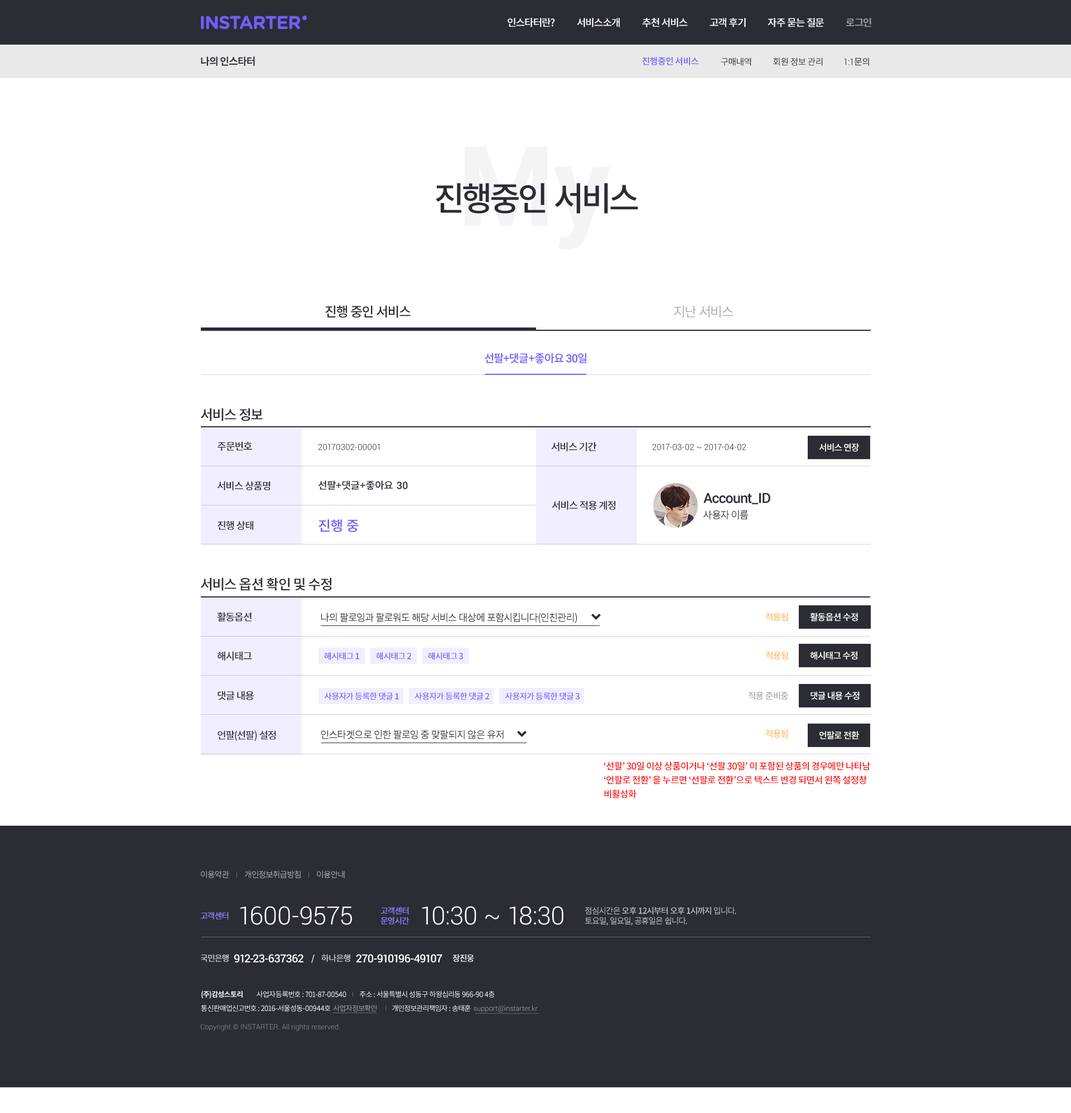
<style>
.page{position:relative;width:1071px;height:1113px;background:#ffffff}
.page>*{position:absolute;margin:0}
.t1{font:18.6px "GothamRounded-Bold";letter-spacing:-0.04em;color:#715eff}
.t2{font:10px "NotoSansCJKkr-Medium";letter-spacing:-0.04em;color:#ffffff}
.t3{font:10px "NotoSansCJKkr-Medium";letter-spacing:-0.04em;color:#abacae}
.t4{font:10px "NotoSansCJKkr-Bold";letter-spacing:-0.04em;color:#2b2c34;text-transform:uppercase}
.t5{font:8.9px "NotoSansCJKkr-Medium";letter-spacing:-0.04em;color:#6e5cf8;text-transform:uppercase}
.t6{font:8.9px "NotoSansCJKkr-Regular";letter-spacing:-0.04em;color:#2b2c34;text-transform:uppercase}
.t7{font:8.9px "Roboto-Light";letter-spacing:-0.04em;color:#2b2c34;text-transform:uppercase}
.t8{font:33.5px "NotoSansCJKkr-Medium";letter-spacing:-0.04em;color:#2b2c34;text-transform:uppercase}
.t9{font:13.4px "NotoSansCJKkr-Medium";letter-spacing:-0.04em;color:#2b2c34}
.t10{font:13.4px "NotoSansCJKkr-Regular";letter-spacing:-0.04em;color:#ababad}
.t11{font:11.2px "NotoSansCJKkr-Medium";letter-spacing:-0.04em;color:#715eff}
.t12{font:11.2px "Roboto-Medium";letter-spacing:-0.04em;color:#715eff}
.t13{font:13.9px "NotoSansCJKkr-Medium";letter-spacing:-0.04em;color:#2b2c34}
.t14{font:10px "NotoSansCJKkr-Medium";letter-spacing:-0.04em;color:#2b2c34}
.t15{font:8.4px "Roboto-Light";color:#2b2c34}
.t16{font:8.9px "NotoSansCJKkr-Medium";letter-spacing:-0.04em;color:#ffffff}
.t17{font:10px "NotoSansCJKkr-Medium";color:#2b2c34}
.t18{font:10px "Roboto-Medium";color:#2b2c34}
.t19{font:13.9px "Roboto-Medium";letter-spacing:-0.04em;color:#2b2c34}
.t20{font:10px "NotoSansCJKkr-Regular";letter-spacing:-0.04em;color:#2b2c34}
.t21{font:13.9px "NotoSansCJKkr-Medium";color:#715eff}
.t22{font:8.9px "NotoSansCJKkr-Medium";letter-spacing:-0.04em;color:#ffbc66}
.t23{font:8.4px "NotoSansCJKkr-Medium";letter-spacing:-0.04em;color:#715eff}
.t24{font:8.9px "NotoSansCJKkr-Medium";letter-spacing:-0.04em;color:#ababad}
.t25{font:9.3px/13.9px "NotoSansCJKkr-Medium";letter-spacing:-0.04em;color:#ff0000}
.t26{font:8.4px "NotoSansCJKkr-Regular";letter-spacing:-0.04em;color:#abacae}
.t27{font:8.4px "NotoSansCJKkr-Medium";letter-spacing:-0.04em;color:#9182ff}
.t28{font:25.1px "Roboto-Light";color:#ffffff}
.t29{font:8.4px/10px "NotoSansCJKkr-Medium";letter-spacing:-0.04em;color:#9182ff}
.t30{font:8.4px/10px "NotoSansCJKkr-Regular";letter-spacing:-0.04em;color:#bebebf}
.t31{font:8.4px/10px "NotoSansCJKkr-Medium";letter-spacing:-0.04em;color:#bebebf}
.t32{font:8.4px "NotoSansCJKkr-Medium";letter-spacing:-0.04em;color:#cfd0d1}
.t33{font:11.2px "Roboto-Medium";letter-spacing:-0.04em;color:#ffffff}
.t34{font:8.4px "NotoSansCJKkr-Medium";letter-spacing:-0.04em;color:#ffffff}
.t35{font:7.3px/13.9px "NotoSansCJKkr-Regular";letter-spacing:-0.04em;color:#ffffff}
.t36{font:7.3px/13.9px "NotoSansCJKkr-Bold";letter-spacing:-0.04em;color:#ffffff}
.t37{font:7.3px/13.9px "NotoSansCJKkr-Regular";letter-spacing:-0.04em;color:#abacae}
.t38{font:7.3px/13.9px "Roboto-Light";color:#abacae}
.t39{font:7.3px "Roboto-Light";color:#95969a}
</style>
<div class="page">
<p class="t1" style="left:201px;top:16px;width:99px;height:14px">INSTARTER</p>
<p class="t2" style="left:508px;top:18px;width:47px;height:9px">인스타터란?</p>
<p class="t2" style="left:577px;top:18px;width:43px;height:9px">서비스소개</p>
<p class="t2" style="left:642px;top:18px;width:46px;height:9px">추천 서비스</p>
<p class="t2" style="left:710px;top:18px;width:36px;height:9px">고객 후기</p>
<p class="t2" style="left:768px;top:18px;width:56px;height:9px">자주 묻는 질문</p>
<p class="t3" style="left:846px;top:18px;width:26px;height:9px">로그인</p>
<p class="t4" style="left:201px;top:56px;width:54px;height:10px">나의 인스타터</p>
<p class="t5" style="left:642px;top:57px;width:57px;height:8px">진행중인 서비스</p>
<p class="t6" style="left:721px;top:57px;width:31px;height:9px">구매내역</p>
<p class="t6" style="left:773px;top:57px;width:50px;height:9px">회원 정보 관리</p>
<p class="t7" style="left:844px;top:57px;width:25px;height:9px">1:1<span class="t6">문의</span></p>
<p class="t8" style="left:436px;top:183px;width:202px;height:31px">진행중인 서비스</p>
<p class="t9" style="left:325px;top:305px;width:86px;height:13px">진행 중인 서비스</p>
<p class="t10" style="left:674px;top:305px;width:59px;height:13px">지난 서비스</p>
<p class="t11" style="left:485px;top:353px;width:102px;height:11px">선팔+댓글+좋아요 <span class="t12">30</span>일</p>
<p class="t13" style="left:201px;top:408px;width:62px;height:13px">서비스 정보</p>
<p class="t14" style="left:218px;top:441px;width:34px;height:10px">주문번호</p>
<p class="t15" style="left:318px;top:444px;width:62px;height:6px">20170302-00001</p>
<p class="t14" style="left:551px;top:442px;width:46px;height:9px">서비스 기간</p>
<p class="t15" style="left:652px;top:444px;width:95px;height:6px">2017-03-02 ~ 2017-04-02</p>
<p class="t16" style="left:819px;top:443px;width:40px;height:9px">서비스 연장</p>
<p class="t14" style="left:217px;top:481px;width:54px;height:9px">서비스 상품명</p>
<p class="t17" style="left:318px;top:480px;width:90px;height:10px">선팔+댓글+좋아요 <span class="t18">30</span></p>
<p class="t19" style="left:704px;top:493px;width:67px;height:11px">Account_ID</p>
<p class="t14" style="left:552px;top:500px;width:64px;height:10px">서비스 적용 계정</p>
<p class="t20" style="left:703px;top:510px;width:45px;height:9px">사용자 이름</p>
<p class="t14" style="left:218px;top:521px;width:35px;height:9px">진행 상태</p>
<p class="t21" style="left:319px;top:519px;width:40px;height:13px">진행 중</p>
<p class="t13" style="left:201px;top:577px;width:131px;height:14px">서비스 옵션 확인 및 수정</p>
<p class="t14" style="left:217px;top:612px;width:35px;height:10px">활동옵션</p>
<p class="t20" style="left:321px;top:613px;width:256px;height:10px">나의 팔로잉과 팔로워도 해당 서비스 대상에 포함시킵니다(인친관리)</p>
<p class="t22" style="left:766px;top:613px;width:22px;height:9px">적용됨</p>
<p class="t16" style="left:810px;top:613px;width:48px;height:9px">활동옵션 수정</p>
<p class="t14" style="left:217px;top:651px;width:35px;height:10px">해시태그</p>
<p class="t23" style="left:324px;top:652px;width:35px;height:8px">해시태그 1</p>
<p class="t23" style="left:376px;top:652px;width:35px;height:8px">해시태그 2</p>
<p class="t23" style="left:428px;top:652px;width:35px;height:8px">해시태그 3</p>
<p class="t22" style="left:766px;top:651px;width:22px;height:9px">적용됨</p>
<p class="t16" style="left:810px;top:651px;width:48px;height:9px">해시태그 수정</p>
<p class="t14" style="left:218px;top:691px;width:36px;height:9px">댓글 내용</p>
<p class="t23" style="left:324px;top:692px;width:75px;height:8px">사용자가 등록한 댓글 1</p>
<p class="t23" style="left:415px;top:692px;width:74px;height:8px">사용자가 등록한 댓글 2</p>
<p class="t23" style="left:505px;top:692px;width:75px;height:8px">사용자가 등록한 댓글 3</p>
<p class="t24" style="left:748px;top:691px;width:40px;height:9px">적용 준비중</p>
<p class="t16" style="left:811px;top:691px;width:49px;height:9px">댓글 내용 수정</p>
<p class="t14" style="left:218px;top:730px;width:58px;height:11px">언팔(선팔) 설정</p>
<p class="t20" style="left:321px;top:730px;width:183px;height:9px">인스타겟으로 인한 팔로잉 중 맞팔되지 않은 유저</p>
<p class="t22" style="left:766px;top:729px;width:22px;height:9px">적용됨</p>
<p class="t16" style="left:820px;top:731px;width:39px;height:8px">언팔로 전환</p>
<p class="t25" style="left:604px;top:762px;width:266px;height:36px">‘선팔’ 30일 이상 상품이거나 ‘선팔 30일’ 이 포함된 상품의 경우에만 나타남<br>‘언팔로 전환’ 을 누르면 ‘선팔로 전환’으로 텍스트 변경 되면서 왼쪽 설정창<br>비활성화</p>
<p class="t26" style="left:201px;top:870px;width:28px;height:8px">이용약관</p>
<p class="t26" style="left:245px;top:870px;width:56px;height:9px">개인정보취급방침</p>
<p class="t26" style="left:317px;top:870px;width:28px;height:8px">이용안내</p>
<p class="t27" style="left:200px;top:912px;width:29px;height:8px">고객센터</p>
<p class="t28" style="left:240px;top:906px;width:112px;height:19px">1600-9575</p>
<p class="t29" style="left:381px;top:907px;width:29px;height:18px">고객센터<br>운영시간</p>
<p class="t28" style="left:422px;top:906px;width:142px;height:19px">10:30 ~ 18:30</p>
<p class="t30" style="left:585px;top:907px;width:151px;height:19px">점심시간은<span class="t31"> 오후 12시부터 오후 1시까지</span> 입니다.<br>토요일, 일요일, 공휴일은 쉽니다.</p>
<p class="t32" style="left:201px;top:954px;width:28px;height:8px">국민은행</p>
<p class="t33" style="left:234px;top:954px;width:70px;height:9px">912-23-637362</p>
<p class="t34" style="left:311px;top:955px;width:4px;height:8px">/</p>
<p class="t32" style="left:321px;top:954px;width:29px;height:8px">하나은행</p>
<p class="t33" style="left:356px;top:954px;width:86px;height:9px"><span class="t34"> </span>270-910196-49107</p>
<p class="t34" style="left:452px;top:954px;width:22px;height:8px">장진웅</p>
<p class="t35" style="left:201px;top:991px;width:337px;height:22px"><span class="t36">(주)감성스토리</span>          사업자등록번호 : 701-87-00540          주소 : 서울특별시 성동구 하왕십리동 966-90 4층  <br>통신판매업신고번호 : 2016-서울성동-00944호  <span class="t37">사업자정보확인</span>           개인정보관리책임자 : 송태훈  <span class="t38">support@instarter.kr</span></p>
<p class="t39" style="left:200px;top:1024px;width:140px;height:7px">Copyright © INSTARTER. All rights reserved.</p>
</div>
